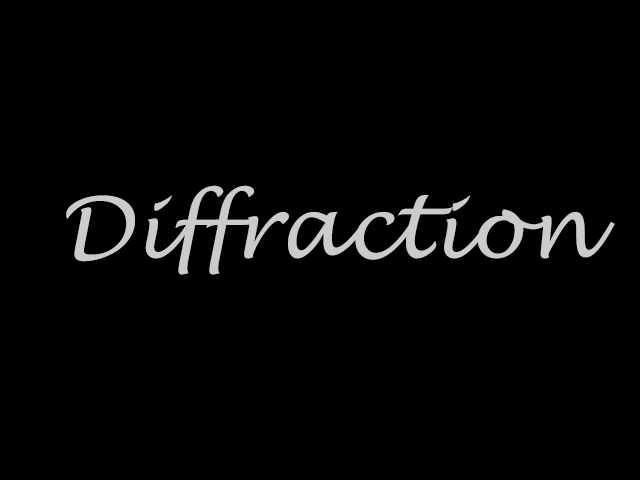
<style>
.page{position:relative;width:640px;height:480px;background:#000000}
.page>*{position:absolute;margin:0}
.t1{font:83.3px "LucidaHandwriting-Italic";letter-spacing:0.01em;color:#cbcbcb}
</style>
<div class="page">
<p class="t1" style="left:66px;top:185px;width:549px;height:90px">Diffraction</p>
</div>
